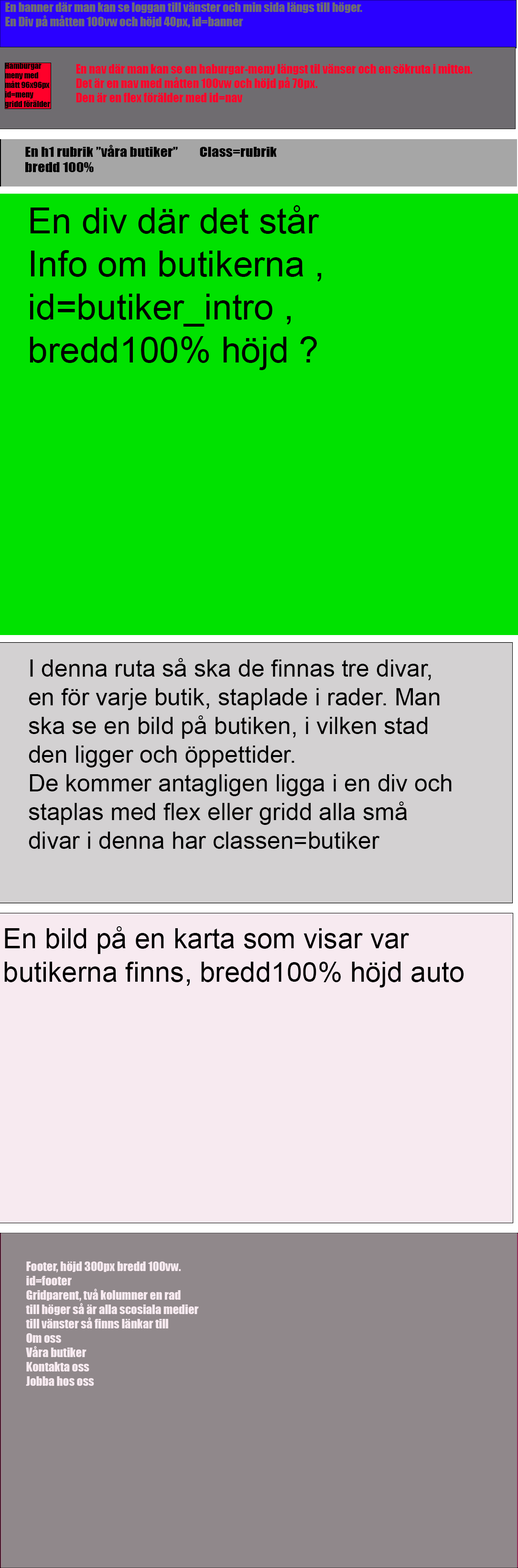
<style>
.page{position:relative;width:518px;height:1568px;background:#00e200}
.page>*{position:absolute;margin:0}
.t1{font:12px "Impact";color:#6f6c70}
.t2{font:8px "Impact";color:#020202}
.t3{font:12px "Impact";color:#ff002a}
.t4{font:12.9px "Impact";color:#000000;scale:1.13 1}
.t5{font:35.9px "ArialMT";color:#000000}
.t6{font:23.9px "ArialMT";color:#000000}
.t7{font:27.9px "ArialMT";color:#000000}
.t8{font:12px "Impact";color:#f7eaf0}
</style>
<div class="page">
<p class="t1" style="left:5px;top:2px;width:357px;height:26px">En banner där man kan se loggan till vänster och min sida längs till höger.<br>En Div på måtten 100vw och höjd 40px, id=banner</p>
<p class="t2" style="left:5px;top:63px;width:45px;height:45px">Hamburgar meny med mått 96x96px<br>id=meny<br>gridd förälder</p>
<p class="t3" style="left:76px;top:64px;width:397px;height:38px">En nav där man kan se en haburgar-meny längst til vänser och en sökruta i mitten.<br>Det är en nav med måtten 100vw och höjd på 70px. <br>Den är en flex förälder med id=nav</p>
<p class="t4" style="left:25px;top:145px;width:252px;height:27px">En h1 rubrik ”våra butiker”  Class=rubrik<br>bredd 100%</p>
<p class="t5" style="left:30px;top:205px;width:292px;height:165px">En div där det står Info om butikerna , id=butiker_intro , bredd100% höjd ?</p>
<p class="t6" style="left:29px;top:658px;width:423px;height:191px">I denna ruta så ska de finnas tre divar, en för varje butik, staplade i rader. Man ska se en bild på butiken, i vilken stad den ligger och öppettider. <br>De kommer antagligen ligga i en div och staplas med flex eller gridd alla små divar i denna har classen=butiker</p>
<p class="t7" style="left:4px;top:926px;width:460px;height:61px">En bild på en karta som visar var butikerna finns, bredd100% höjd auto</p>
<p class="t8" style="left:26px;top:1261px;width:173px;height:125px">Footer, höjd 300px bredd 100vw.<br>id=footer<br>Gridparent, två kolumner en rad<br>till höger så är alla scosiala medier<br>till vänster så finns länkar till <br>Om oss<br>Våra butiker<br>Kontakta oss<br>Jobba hos oss</p>
</div>
